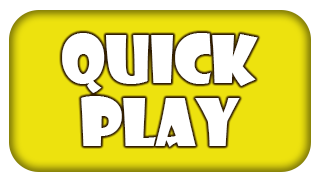
<style>
.page{position:relative;width:322px;height:182px;background:#ffffff}
.page>*{position:absolute;margin:0}
.t1{font:63.5px/63.5px "ShowcardGothic-Reg";color:#ffffff}
</style>
<div class="page">
<p class="t1" style="left:62px;top:33px;width:196px;height:114px;text-align:center">QUICK<br>PLAY</p>
</div>
